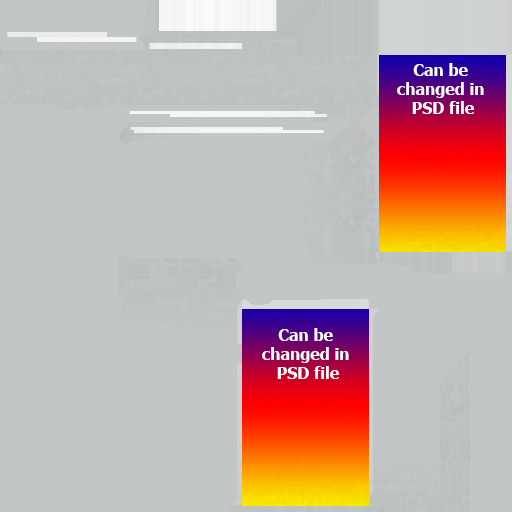
<style>
.page{position:relative;width:512px;height:512px;background:#c3c6c6}
.page>*{position:absolute;margin:0}
.t1{font:16px "Tahoma-Bold";color:#ffffff}
</style>
<div class="page">
<p class="t1" style="left:397px;top:63px;width:87px;height:51px;text-align:center">Can be <br>changed in <br>PSD file</p>
<p class="t1" style="left:262px;top:328px;width:87px;height:51px;text-align:center">Can be <br>changed in <br>PSD file</p>
</div>
